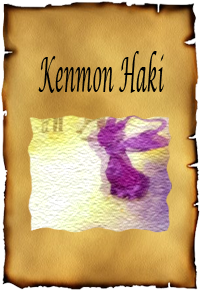
<style>
.page{position:relative;width:200px;height:290px}
.page>*{position:absolute;margin:0}
.t1{font:48px "LucidaCalligraphy-Italic";color:#000000;scale:0.34 1}
</style>
<div class="page">
<p class="t1" style="left:38px;top:51px;width:126px;height:42px">Kenmon Haki</p>
</div>
